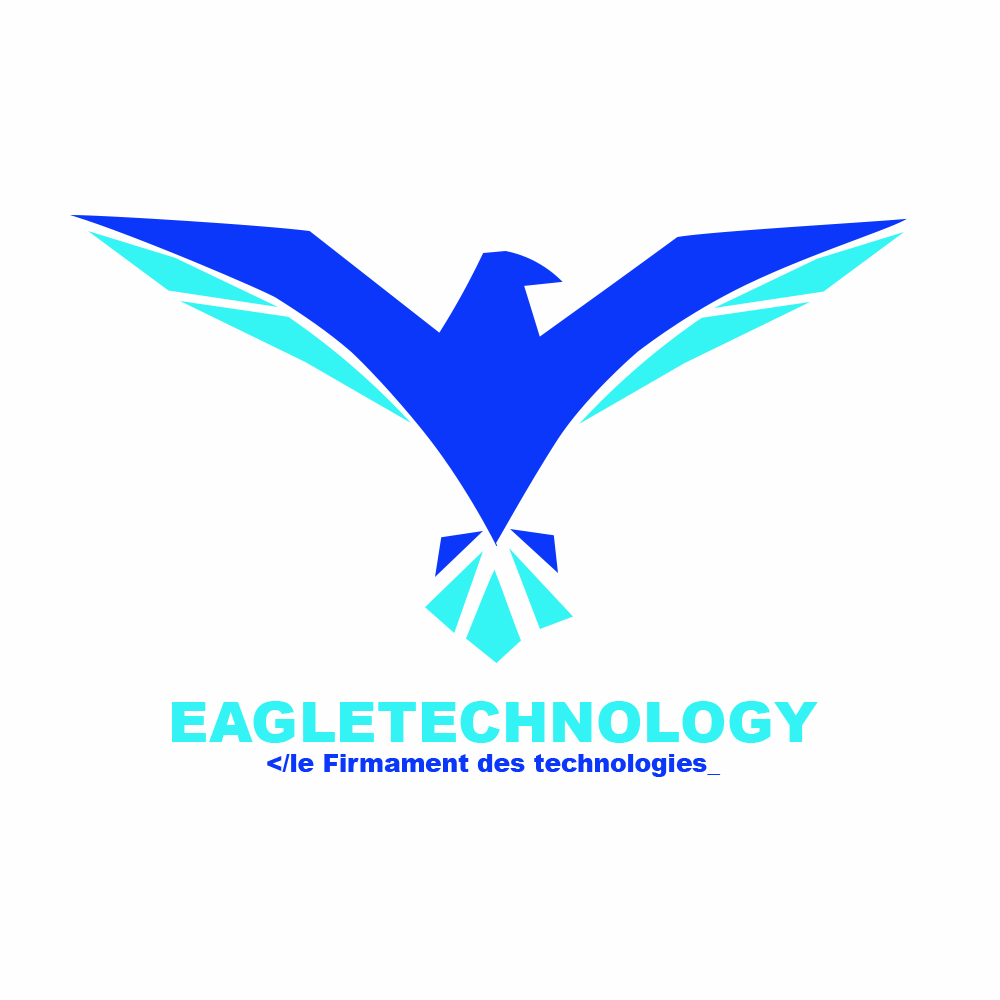
<style>
.page{position:relative;width:1000px;height:1000px;background:#fefefe}
.page>*{position:absolute;margin:0}
.t1{font:24.7px "Arial-Black";color:#0a37fa}
.t2{font:56.4px "Arial-Black";color:#34f3f5}
</style>
<div class="page">
<p class="t1" style="left:172px;top:701px;width:646px;height:76px;text-align:center"><span class="t2">EAGLETECHNOLOGY<br></span>&lt;/le Firmament des technologies_</p>
</div>
